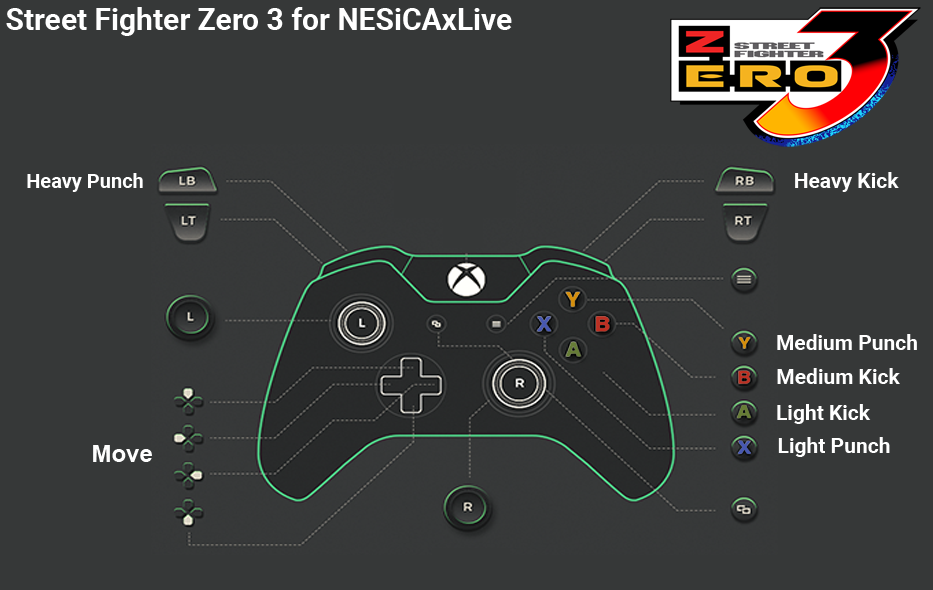
<style>
.page{position:relative;width:933px;height:590px;background:#363838}
.page>*{position:absolute;margin:0}
.t1{font:30px "Roboto-Bold";color:#ffffff}
.t2{font:20px "Roboto-Bold";color:#ffffff}
.t3{font:21px "Roboto-Bold";color:#ffffff}
.t4{font:24px "Arial-BoldMT";color:#fefefe}
</style>
<div class="page">
<p class="t1" style="left:6px;top:7px;width:506px;height:29px">Street Fighter Zero 3 for NESiCAxLive</p>
<p class="t2" style="left:27px;top:173px;width:116px;height:19px">Heavy Punch</p>
<p class="t3" style="left:795px;top:172px;width:104px;height:20px">Heavy Kick</p>
<p class="t3" style="left:777px;top:334px;width:140px;height:16px">Medium Punch</p>
<p class="t3" style="left:777px;top:368px;width:123px;height:16px">Medium Kick</p>
<p class="t3" style="left:777px;top:404px;width:94px;height:20px">Light Kick</p>
<p class="t3" style="left:778px;top:437px;width:112px;height:20px">Light Punch</p>
<p class="t4" style="left:93px;top:445px;width:59px;height:17px">Move</p>
</div>
